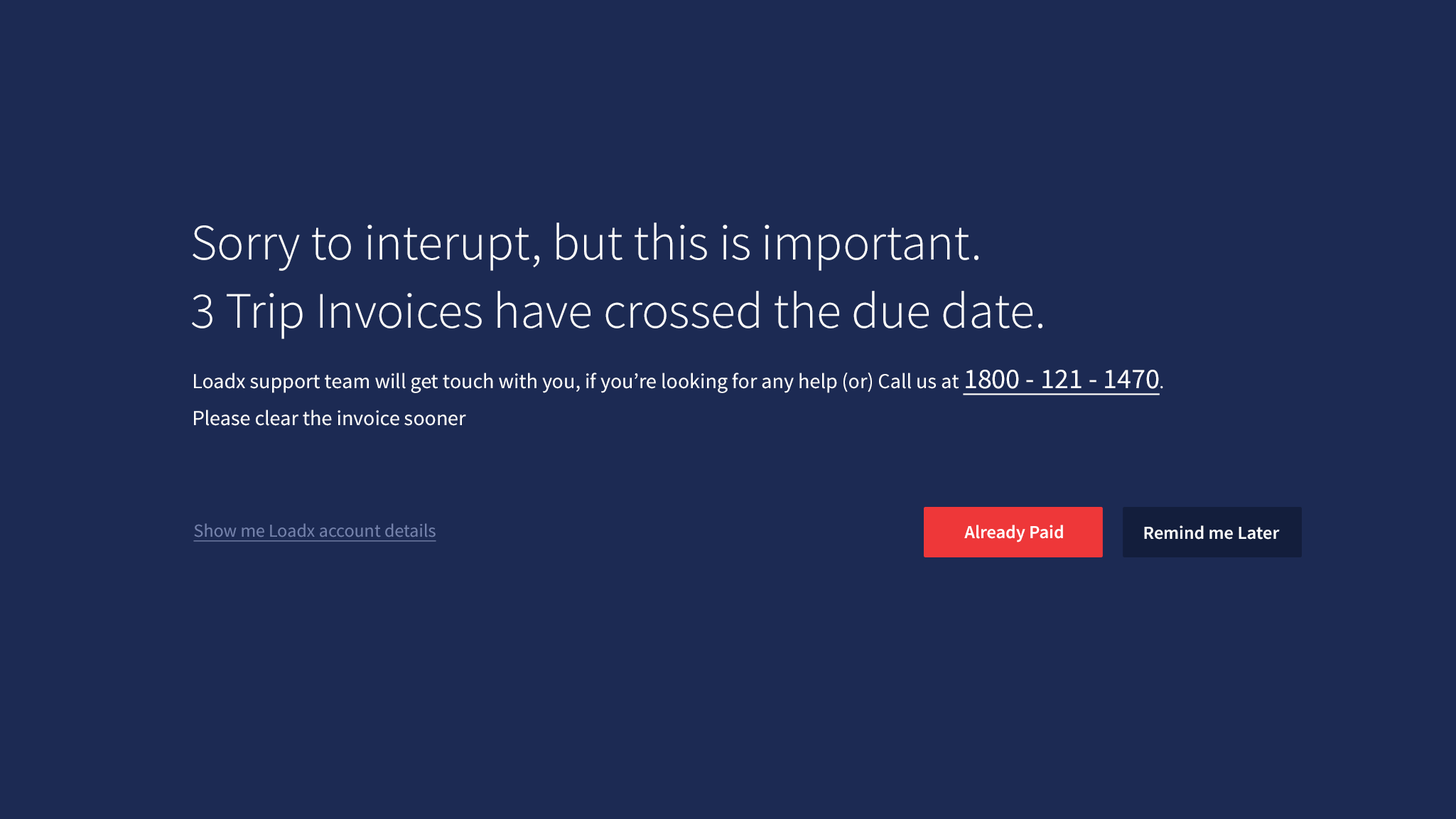
<style>
.page{position:relative;width:1456px;height:819px;background:#1c2a53}
.page>*{position:absolute;margin:0}
.t1{font:51.2px/68.2px "SourceSansPro-Light";color:#fefefe}
.t2{font:21.3px/37px "SourceSansPro-Regular";color:#fefefe}
.t3{font:28.4px/37px "SourceSansPro-Regular";color:#ffffff;text-decoration:underline}
.t4{font:18.5px/37px "SourceSansPro-Regular";color:#fefefe}
.t5{font:18.5px "SourceSansPro-Regular";color:#7482ac;text-decoration:underline}
.t6{font:18.5px "SourceSansPro-Semibold";color:#ffffff}
</style>
<div class="page">
<p class="t1" style="left:192px;top:222px;width:851px;height:117px">Sorry to interupt, but this is important. <br>3 Trip Invoices have crossed the due date.</p>
<p class="t2" style="left:194px;top:370px;width:970px;height:56px">Loadx support team will get touch with you, if you’re looking for any help (or) Call us at <span class="t3">1800 - 121 - 1470</span><span class="t4">. <br></span>Please clear the invoice sooner</p>
<p class="t5" style="left:193px;top:523px;width:243px;height:19px">Show me Loadx account details</p>
<p class="t6" style="left:964px;top:525px;width:99px;height:17px">Already Paid</p>
<p class="t6" style="left:1144px;top:525px;width:136px;height:14px">Remind me Later</p>
</div>
